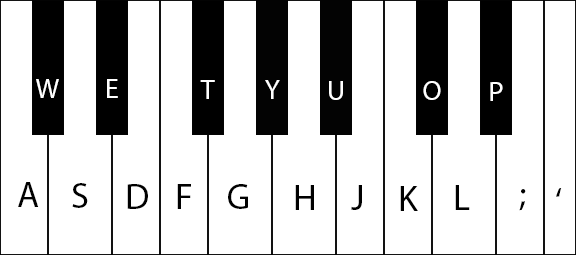
<style>
.page{position:relative;width:576px;height:255px;background:#ffffff}
.page>*{position:absolute;margin:0}
.t1{font:28px "MyriadPro-Regular";color:#ffffff}
.t2{font:36px "MyriadPro-Regular";color:#010101}
.t3{font:36px "MyriadPro-Regular";color:#000000}
</style>
<div class="page">
<p class="t1" style="left:36px;top:79px;width:23px;height:19px">W</p>
<p class="t1" style="left:107px;top:79px;width:11px;height:19px">E</p>
<p class="t1" style="left:200px;top:80px;width:15px;height:19px">T</p>
<p class="t1" style="left:265px;top:80px;width:15px;height:19px">Y</p>
<p class="t1" style="left:329px;top:81px;width:14px;height:19px">U</p>
<p class="t1" style="left:423px;top:81px;width:18px;height:19px">O</p>
<p class="t1" style="left:490px;top:82px;width:13px;height:19px">P</p>
<p class="t2" style="left:18px;top:182px;width:21px;height:25px">A</p>
<p class="t3" style="left:72px;top:183px;width:16px;height:25px">S</p>
<p class="t3" style="left:127px;top:184px;width:21px;height:25px">D</p>
<p class="t3" style="left:177px;top:184px;width:14px;height:25px">F</p>
<p class="t3" style="left:228px;top:184px;width:20px;height:25px">G</p>
<p class="t3" style="left:295px;top:185px;width:19px;height:25px">H</p>
<p class="t3" style="left:351px;top:185px;width:11px;height:25px">J</p>
<p class="t3" style="left:455px;top:185px;width:15px;height:25px">L</p>
<p class="t3" style="left:400px;top:186px;width:18px;height:25px">K</p>
<p class="t3" style="left:519px;top:189px;width:7px;height:22px">;</p>
<p class="t3" style="left:556px;top:188px;width:6px;height:9px">‘</p>
</div>
